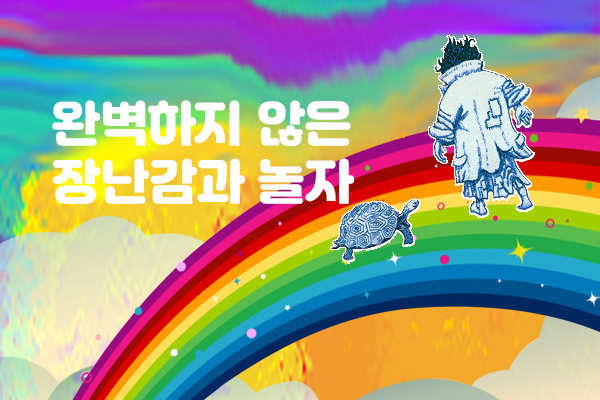
<style>
.page{position:relative;width:600px;height:400px}
.page>*{position:absolute;margin:0}
.t1{font:48px "Jalnan";color:#ffffff}
</style>
<div class="page">
<p class="t1" style="left:52px;top:100px;width:303px;height:104px">완벽하지 않은 장난감과 놀자</p>
</div>
